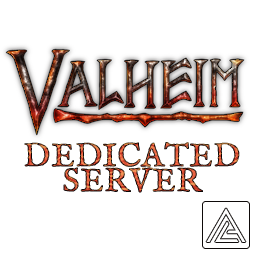
<style>
.page{position:relative;width:256px;height:256px;background:#ffffff}
.page>*{position:absolute;margin:0}
.t1{font:33.3px/25px "IM_FELL_English_SC";font-weight:bold}
</style>
<div class="page">
<p class="t1" style="left:24px;top:142px;width:216px;height:51px;text-align:center">DEDICATED<br>SERVER</p>
</div>
